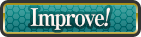
<style>
.page{position:relative;width:141px;height:37px}
.page>*{position:absolute;margin:0}
.t1{font:24px "RyuminPro-ExBold";letter-spacing:-0.08em;color:#fff6f2;scale:0.9 1}
.t2{font:24px "RyuminPro-ExBold";letter-spacing:-0.08em;color:#fff6f2;font-style:italic;scale:0.9 1}
</style>
<div class="page">
<p class="t1" style="left:30px;top:7px;width:80px;height:23px">Improve<span class="t2">!</span></p>
</div>
